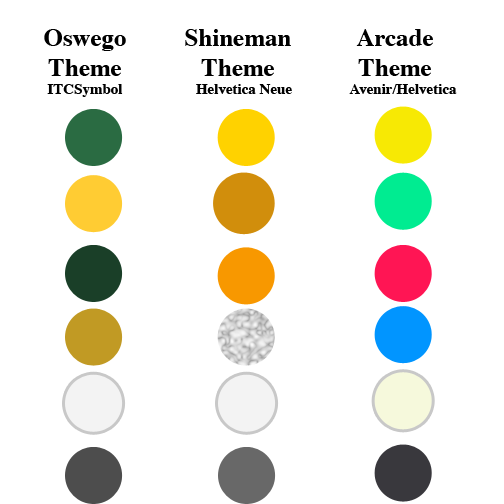
<style>
.page{position:relative;width:504px;height:504px;background:#ffffff}
.page>*{position:absolute;margin:0}
.t1{font:25px "Times-Bold";color:#000000}
.t2{font:15px "Times-Bold";color:#000000}
</style>
<div class="page">
<p class="t1" style="left:44px;top:29px;width:82px;height:47px;text-align:center">Oswego <br>Theme</p>
<p class="t1" style="left:185px;top:29px;width:106px;height:47px;text-align:center">Shineman Theme</p>
<p class="t1" style="left:356px;top:29px;width:77px;height:47px;text-align:center">Arcade Theme</p>
<p class="t2" style="left:47px;top:84px;width:76px;height:13px">ITCSymbol</p>
<p class="t2" style="left:196px;top:84px;width:96px;height:10px">Helvetica Neue</p>
<p class="t2" style="left:349px;top:84px;width:108px;height:10px">Avenir/Helvetica</p>
</div>
